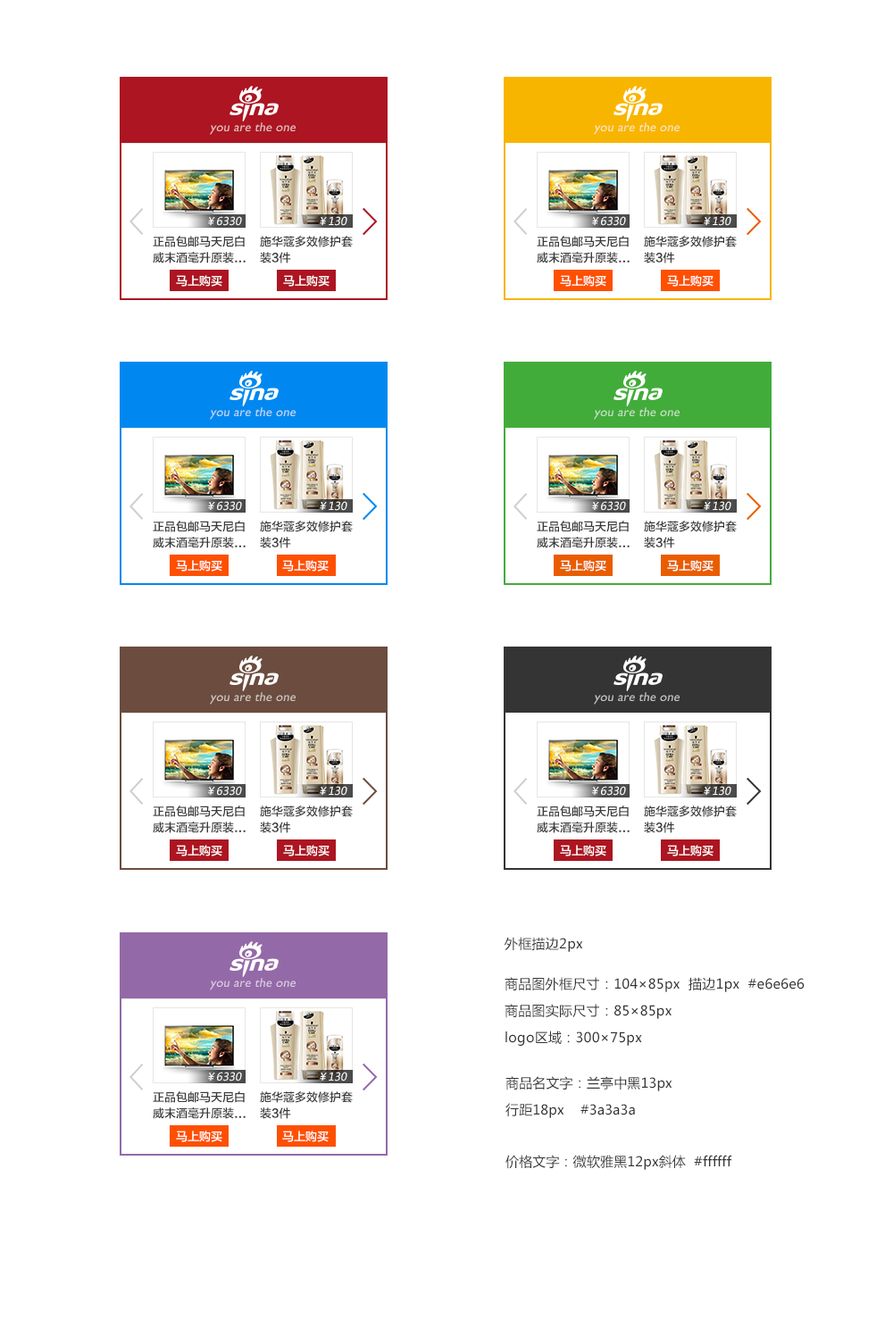
<style>
.page{position:relative;width:893px;height:1336px;background:#ffffff}
.page>*{position:absolute;margin:0}
.t1{font:12.7px "GillSansMT";letter-spacing:0.018em;color:#e2bec0;font-style:italic}
.t2{font:12.7px "GillSansMT";letter-spacing:0.018em;color:#fce5bb;font-style:italic}
.t3{font:10.7px "MicrosoftYaHei";color:#ffffff;font-style:italic}
.t4{font:11.6px/16.1px "FZLTZHK--GBK1-0";color:#3a3a3a}
.t5{font:11.6px "FZLTZHK--GBK1-0";color:#ffffff}
.t6{font:12.7px "GillSansMT";letter-spacing:0.018em;color:#bbd7f9;font-style:italic}
.t7{font:12.7px "GillSansMT";letter-spacing:0.018em;color:#c5e2c4;font-style:italic}
.t8{font:12.7px "GillSansMT";letter-spacing:0.018em;color:#cfc7c5;font-style:italic}
.t9{font:12.7px "GillSansMT";letter-spacing:0.018em;color:#c3c3c3;font-style:italic}
.t10{font:13.4px "MicrosoftYaHei";letter-spacing:0.018em;color:#353535}
.t11{font:12.7px "GillSansMT";letter-spacing:0.018em;color:#dacee0;font-style:italic}
.t12{font:13.4px/26.8px "MicrosoftYaHei";letter-spacing:0.018em;color:#353535}
.t13{font:13.4px/26.8px "MicrosoftYaHei";letter-spacing:0.01em;color:#353535}
.t14{font:13.4px "MicrosoftYaHei";letter-spacing:0.01em;color:#353535}
</style>
<div class="page">
<p class="t1" style="left:210px;top:122px;width:86px;height:13px">you are the one</p>
<p class="t2" style="left:594px;top:122px;width:85px;height:13px">you are the one</p>
<p class="t3" style="left:208px;top:216px;width:34px;height:10px">￥6330</p>
<p class="t3" style="left:208px;top:216px;width:34px;height:10px">￥6330</p>
<p class="t3" style="left:320px;top:216px;width:27px;height:10px">￥130</p>
<p class="t3" style="left:320px;top:216px;width:27px;height:10px">￥130</p>
<p class="t3" style="left:592px;top:216px;width:34px;height:10px">￥6330</p>
<p class="t3" style="left:704px;top:216px;width:27px;height:10px">￥130</p>
<p class="t4" style="left:153px;top:236px;width:93px;height:27px">正品包邮马天尼白<br>威末酒毫升原装...</p>
<p class="t4" style="left:153px;top:236px;width:93px;height:27px">正品包邮马天尼白<br>威末酒毫升原装...</p>
<p class="t4" style="left:260px;top:236px;width:93px;height:27px">施华蔻多效修护套<br>装3件</p>
<p class="t4" style="left:260px;top:236px;width:93px;height:27px">施华蔻多效修护套<br>装3件</p>
<p class="t4" style="left:537px;top:236px;width:92px;height:27px">正品包邮马天尼白<br>威末酒毫升原装...</p>
<p class="t4" style="left:644px;top:236px;width:93px;height:27px">施华蔻多效修护套<br>装3件</p>
<p class="t5" style="left:176px;top:275px;width:46px;height:12px">马上购买</p>
<p class="t5" style="left:283px;top:275px;width:46px;height:12px">马上购买</p>
<p class="t5" style="left:560px;top:275px;width:46px;height:12px">马上购买</p>
<p class="t5" style="left:667px;top:275px;width:46px;height:12px">马上购买</p>
<p class="t6" style="left:210px;top:407px;width:86px;height:13px">you are the one</p>
<p class="t7" style="left:594px;top:407px;width:85px;height:13px">you are the one</p>
<p class="t3" style="left:208px;top:501px;width:34px;height:10px">￥6330</p>
<p class="t3" style="left:320px;top:501px;width:27px;height:10px">￥130</p>
<p class="t3" style="left:592px;top:501px;width:34px;height:10px">￥6330</p>
<p class="t3" style="left:704px;top:501px;width:27px;height:10px">￥130</p>
<p class="t4" style="left:153px;top:520px;width:93px;height:28px">正品包邮马天尼白<br>威末酒毫升原装...</p>
<p class="t4" style="left:260px;top:520px;width:93px;height:28px">施华蔻多效修护套<br>装3件</p>
<p class="t4" style="left:537px;top:520px;width:92px;height:28px">正品包邮马天尼白<br>威末酒毫升原装...</p>
<p class="t4" style="left:644px;top:520px;width:93px;height:28px">施华蔻多效修护套<br>装3件</p>
<p class="t5" style="left:176px;top:560px;width:46px;height:11px">马上购买</p>
<p class="t5" style="left:282px;top:560px;width:47px;height:11px">马上购买</p>
<p class="t5" style="left:560px;top:560px;width:46px;height:11px">马上购买</p>
<p class="t5" style="left:667px;top:560px;width:46px;height:11px">马上购买</p>
<p class="t8" style="left:210px;top:692px;width:86px;height:12px">you are the one</p>
<p class="t9" style="left:594px;top:692px;width:85px;height:12px">you are the one</p>
<p class="t3" style="left:208px;top:786px;width:34px;height:9px">￥6330</p>
<p class="t3" style="left:320px;top:786px;width:27px;height:9px">￥130</p>
<p class="t3" style="left:592px;top:786px;width:34px;height:9px">￥6330</p>
<p class="t3" style="left:704px;top:786px;width:27px;height:9px">￥130</p>
<p class="t4" style="left:153px;top:805px;width:93px;height:28px">正品包邮马天尼白<br>威末酒毫升原装...</p>
<p class="t4" style="left:260px;top:805px;width:93px;height:28px">施华蔻多效修护套<br>装3件</p>
<p class="t4" style="left:537px;top:805px;width:92px;height:28px">正品包邮马天尼白<br>威末酒毫升原装...</p>
<p class="t4" style="left:644px;top:805px;width:93px;height:28px">施华蔻多效修护套<br>装3件</p>
<p class="t5" style="left:176px;top:845px;width:46px;height:11px">马上购买</p>
<p class="t5" style="left:283px;top:845px;width:46px;height:11px">马上购买</p>
<p class="t5" style="left:560px;top:845px;width:46px;height:11px">马上购买</p>
<p class="t5" style="left:667px;top:845px;width:46px;height:11px">马上购买</p>
<p class="t10" style="left:504px;top:937px;width:79px;height:15px">外框描边2px</p>
<p class="t11" style="left:210px;top:978px;width:86px;height:12px">you are the one</p>
<p class="t12" style="left:504px;top:977px;width:300px;height:68px">商品图外框尺寸：104×85px  描边1px  #e6e6e6<br>商品图实际尺寸：85×85px<br>logo区域：300×75px</p>
<p class="t3" style="left:208px;top:1071px;width:34px;height:10px">￥6330</p>
<p class="t3" style="left:320px;top:1071px;width:27px;height:10px">￥130</p>
<p class="t13" style="left:505px;top:1076px;width:167px;height:42px">商品名文字：兰亭中黑13px <br>行距18px    #3a3a3a</p>
<p class="t4" style="left:153px;top:1091px;width:93px;height:28px">正品包邮马天尼白<br>威末酒毫升原装...</p>
<p class="t4" style="left:260px;top:1091px;width:93px;height:28px">施华蔻多效修护套<br>装3件</p>
<p class="t5" style="left:176px;top:1130px;width:46px;height:12px">马上购买</p>
<p class="t5" style="left:282px;top:1130px;width:47px;height:12px">马上购买</p>
<p class="t14" style="left:505px;top:1154px;width:227px;height:16px">价格文字：微软雅黑12px斜体  #ffffff</p>
</div>
